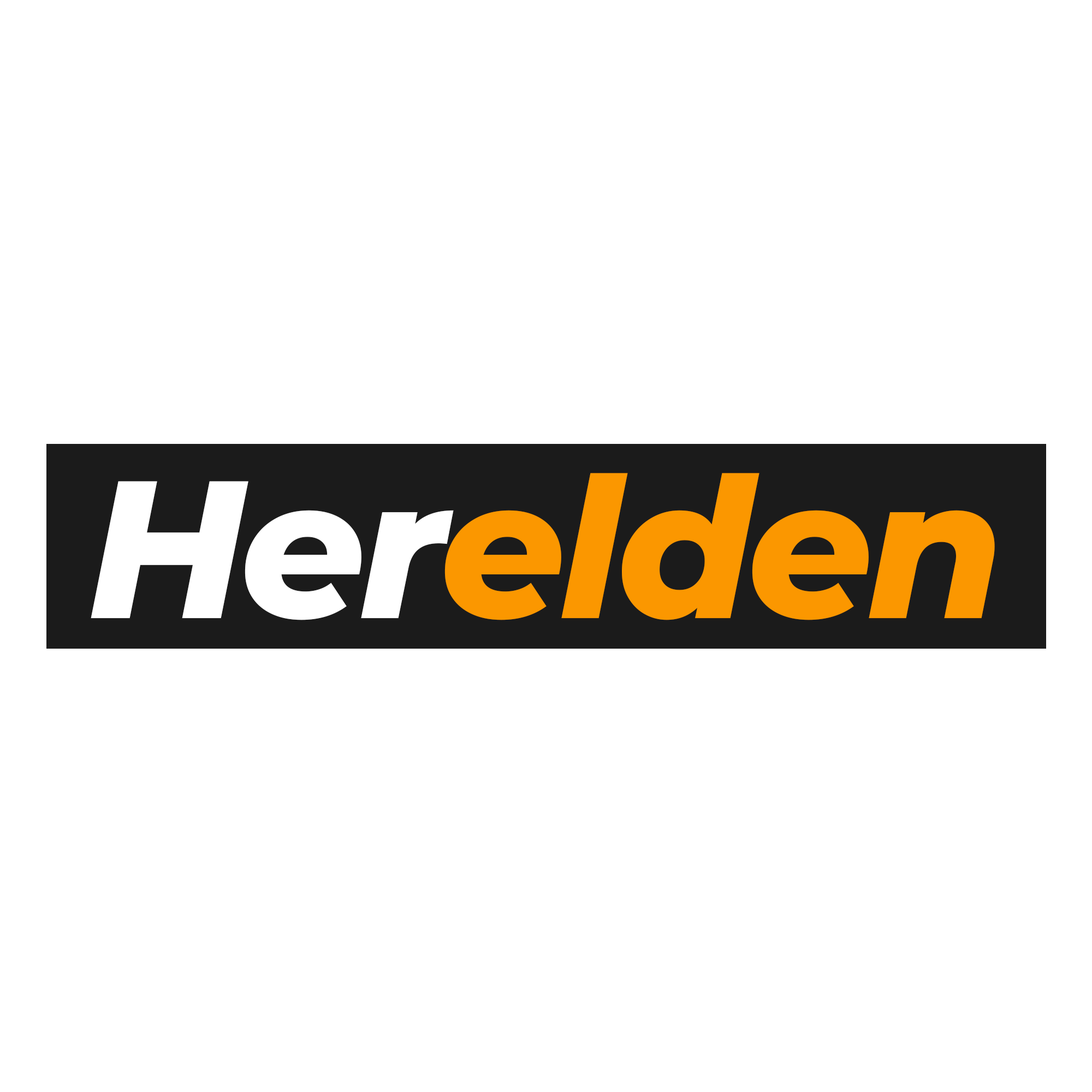
<style>
.page{position:relative;width:1092px;height:1092px;background:#ffffff}
.page>*{position:absolute;margin:0}
.t1{font:195.3px "Montserrat-ExtraBoldItalic";letter-spacing:-0.025em;color:#fb9700}
.t2{font:195.3px "Montserrat-ExtraBoldItalic";letter-spacing:-0.025em;color:#ffffff}
</style>
<div class="page">
<p class="t1" style="left:91px;top:473px;width:904px;height:147px"><span class="t2">Her</span>elden</p>
</div>
